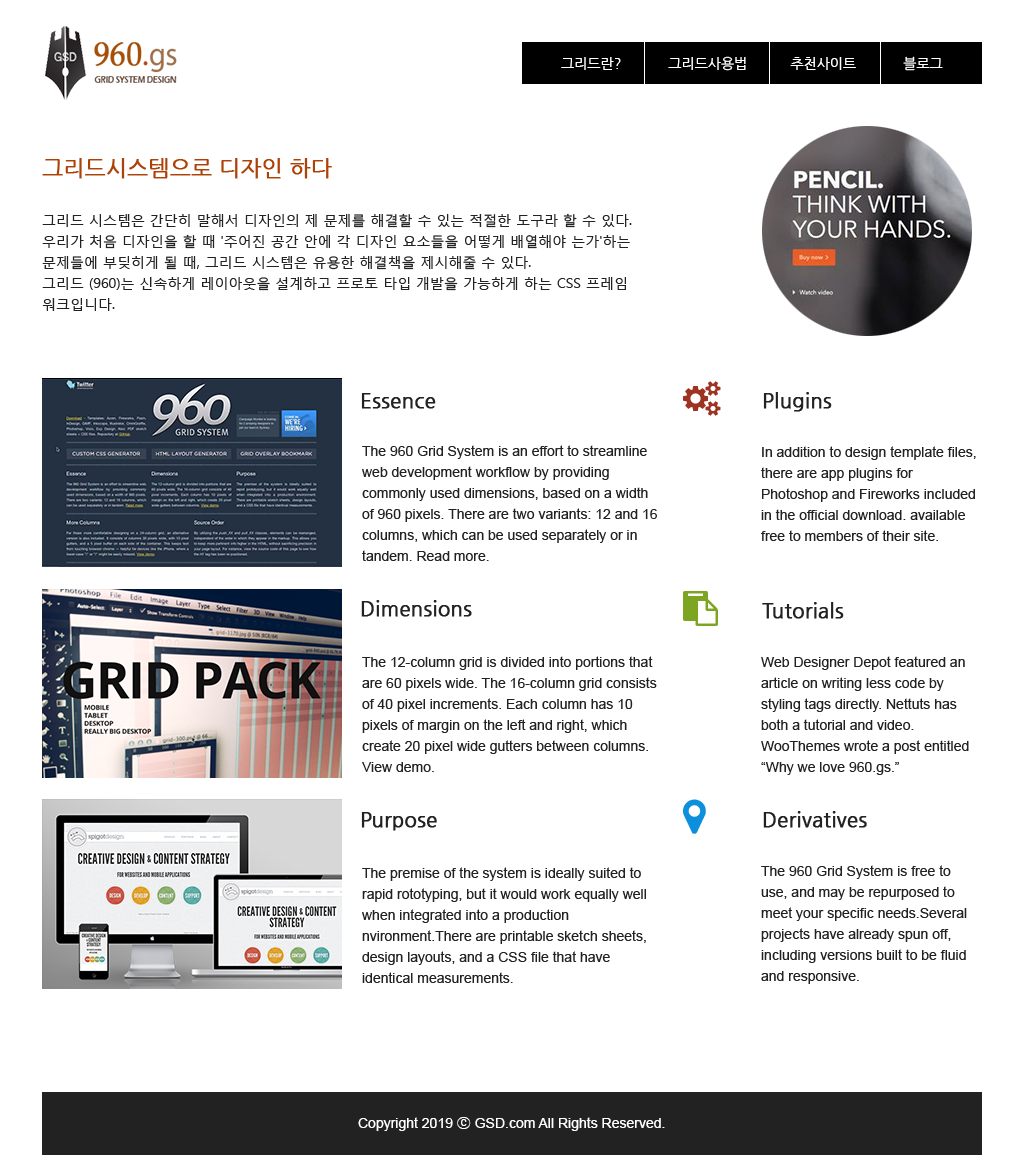
<style>
.page{position:relative;width:1024px;height:1155px;background:#ffffff}
.page>*{position:absolute;margin:0}
.t1{font:14px "NanumGothic";color:#ffffff}
.t2{font:22px "NanumGothic";color:#ae4105;font-weight:bold}
.t3{font:14px/21px "MalgunGothicRegular";color:#222222}
.t4{font:20px "NanumGothic";color:#222222;font-weight:bold}
.t5{font:14px/21px "ArialMT";color:#222222}
.t6{font:14px "ArialMT";color:#ffffff}
.t7{font:14px "Gulim";color:#ffffff}
</style>
<div class="page">
<p class="t1" style="left:561px;top:56px;width:382px;height:15px">그리드란?            그리드사용법           추천사이트            블로그</p>
<p class="t2" style="left:42px;top:158px;width:290px;height:21px">그리드시스템으로 디자인 하다</p>
<p class="t3" style="left:42px;top:213px;width:590px;height:98px">그리드 시스템은 간단히 말해서 디자인의 제 문제를 해결할 수 있는 적절한 도구라 할 수 있다.<br>우리가 처음 디자인을 할 때 '주어진 공간 안에 각 디자인 요소들을 어떻게 배열해야 는가'하는 문제들에 부딪히게 될 때, 그리드 시스템은 유용한 해결책을 제시해줄 수 있다.<br>그리드 (960)는 신속하게 레이아웃을 설계하고 프로토 타입 개발을 가능하게 하는 CSS 프레임 워크입니다.</p>
<p class="t4" style="left:361px;top:393px;width:75px;height:16px">Essence</p>
<p class="t4" style="left:763px;top:392px;width:69px;height:20px">Plugins</p>
<p class="t5" style="left:362px;top:445px;width:295px;height:116px">The 960 Grid System is an effort to streamline web development workflow by providing commonly used dimensions, based on a width of 960 pixels. There are two variants: 12 and 16 columns, which can be used separately or in tandem. Read more.</p>
<p class="t5" style="left:761px;top:446px;width:215px;height:95px">In addition to design template files, there are app plugins for Photoshop and Fireworks included in the official download. available free to members of their site.</p>
<p class="t4" style="left:361px;top:600px;width:111px;height:17px">Dimensions</p>
<p class="t4" style="left:762px;top:602px;width:82px;height:17px">Tutorials</p>
<p class="t5" style="left:362px;top:656px;width:295px;height:116px">The 12-column grid is divided into portions that are 60 pixels wide. The 16-column grid consists of 40 pixel increments. Each column has 10 pixels of margin on the left and right, which create 20 pixel wide gutters between columns. View demo.</p>
<p class="t5" style="left:761px;top:656px;width:208px;height:119px">Web Designer Depot featured an article on writing less code by styling tags directly. Nettuts has both a tutorial and video. WooThemes wrote a post entitled “Why we love 960.gs.”</p>
<p class="t4" style="left:361px;top:812px;width:76px;height:19px">Purpose</p>
<p class="t4" style="left:763px;top:811px;width:104px;height:17px">Derivatives</p>
<p class="t5" style="left:362px;top:867px;width:284px;height:116px">The premise of the system is ideally suited to rapid rototyping, but it would work equally well when integrated into a production nvironment.There are printable sketch sheets, design layouts, and a CSS file that have identical measurements.</p>
<p class="t5" style="left:761px;top:865px;width:206px;height:119px">The 960 Grid System is free to use, and may be repurposed to meet your specific needs.Several projects have already spun off, including versions built to be fluid and responsive.</p>
<p class="t6" style="left:358px;top:1117px;width:307px;height:14px">Copyright 2019 <span class="t7">ⓒ</span> GSD.com All Rights Reserved.</p>
</div>
